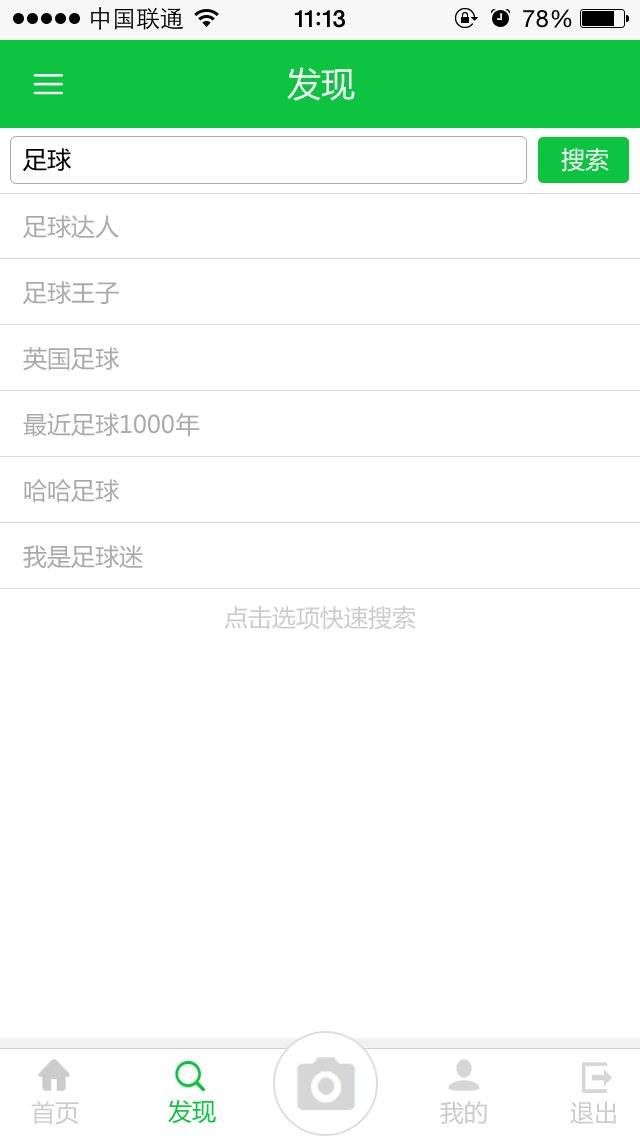
<style>
.page{position:relative;width:640px;height:1136px;background:#ffffff}
.page>*{position:absolute;margin:0}
.t1{font:34px "MicrosoftYaHei";color:#ffffff}
.t2{font:24px "MicrosoftYaHei";color:#000000}
.t3{font:24px "MicrosoftYaHei";color:#ffffff}
.t4{font:24px/66px "MicrosoftYaHei";color:#aaaaaa}
.t5{font:24px "MicrosoftYaHei";color:#cccccc}
.t6{font:24px "MicrosoftYaHei";color:#0dc441}
</style>
<div class="page">
<p class="t1" style="left:287px;top:67px;width:68px;height:34px">发现</p>
<p class="t2" style="left:23px;top:148px;width:48px;height:24px">足球</p>
<p class="t3" style="left:561px;top:148px;width:48px;height:24px">搜索</p>
<p class="t4" style="left:23px;top:215px;width:177px;height:354px">足球达人<br>足球王子<br>英国足球<br>最近足球1000年<br>哈哈足球<br>我是足球迷</p>
<p class="t5" style="left:224px;top:606px;width:192px;height:24px">点击选项快速搜索</p>
<p class="t5" style="left:31px;top:1101px;width:48px;height:24px">首页</p>
<p class="t6" style="left:168px;top:1100px;width:48px;height:24px">发现</p>
<p class="t5" style="left:440px;top:1101px;width:47px;height:23px">我的</p>
<p class="t5" style="left:570px;top:1101px;width:46px;height:23px">退出</p>
</div>
